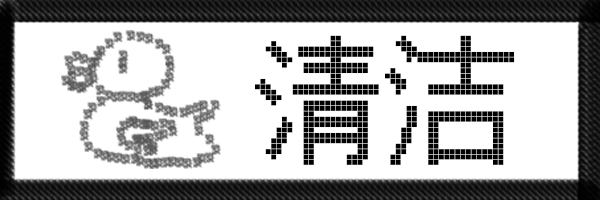
<style>
.page{position:relative;width:600px;height:200px;background:#ffffff}
.page>*{position:absolute;margin:0}
.t1{font:129.6px "FZXS24--GB1-0";color:#000000}
</style>
<div class="page">
<p class="t1" style="left:255px;top:35px;width:260px;height:130px">清洁</p>
</div>
